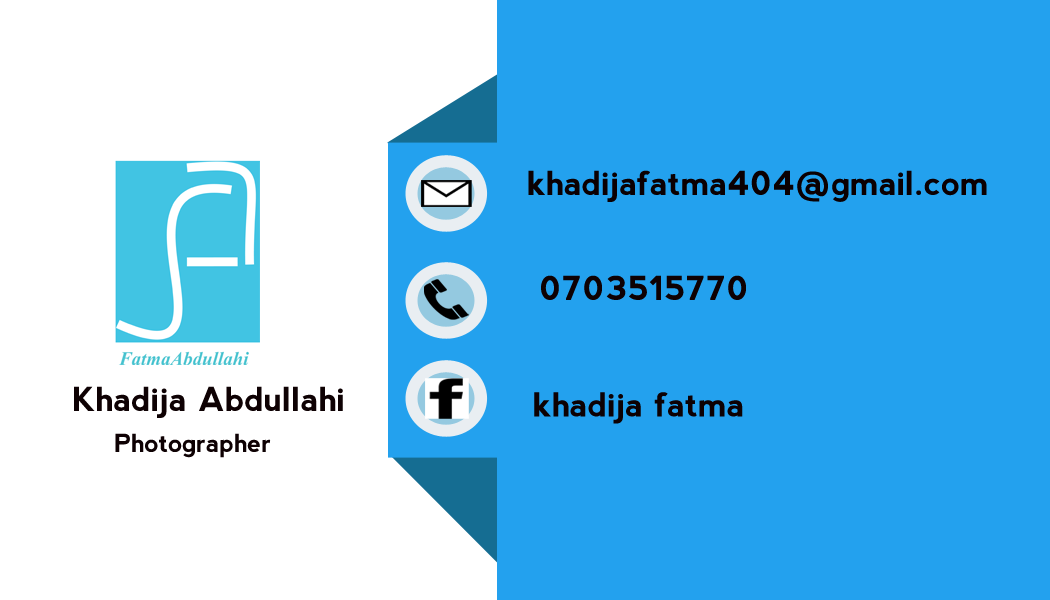
<style>
.page{position:relative;width:1050px;height:600px;background:#23a1ee}
.page>*{position:absolute;margin:0}
.t1{font:33.3px "nevis-Bold";color:#0b0002}
.t2{font:33.3px "nevis-Bold";color:#0e0103}
.t3{font:37.5px "nevis-Bold";color:#ba1f39}
.t4{font:33.3px "nevis-Bold";color:#0d0103}
.t5{font:25px "nevis-Bold";color:#0e0103}
</style>
<div class="page">
<p class="t1" style="left:528px;top:170px;width:459px;height:32px">khadijafatma404@gmail.com</p>
<p class="t2" style="left:541px;top:275px;width:205px;height:25px"><span class="t3">                 </span>0703515770</p>
<p class="t2" style="left:74px;top:386px;width:269px;height:32px">Khadija Abdullahi</p>
<p class="t4" style="left:534px;top:392px;width:209px;height:32px">khadija fatma</p>
<p class="t5" style="left:115px;top:433px;width:156px;height:25px">Photographer</p>
</div>
